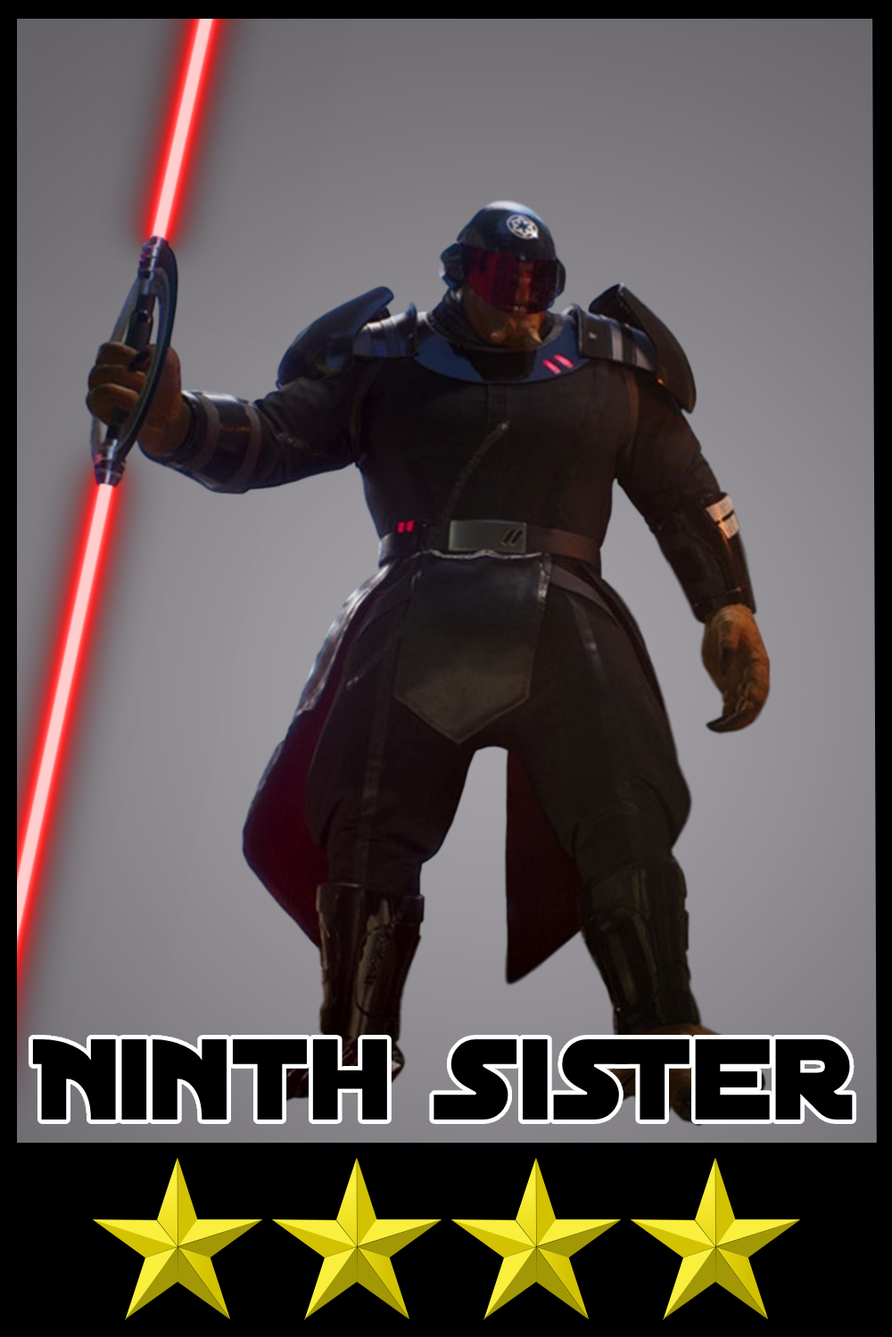
<style>
.page{position:relative;width:892px;height:1337px}
.page>*{position:absolute;margin:0}
.t1{font:123.3px "DistantGalaxy";color:#000000}
</style>
<div class="page">
<p class="t1" style="left:32px;top:1040px;width:820px;height:80px">Ninth Sister</p>
</div>
